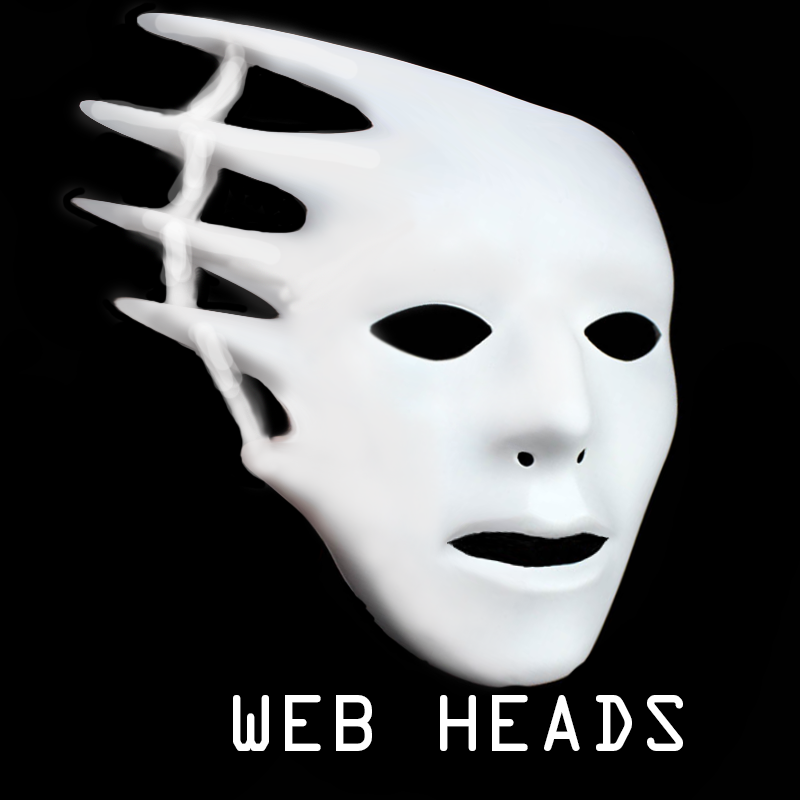
<style>
.page{position:relative;width:800px;height:800px;background:#000000}
.page>*{position:absolute;margin:0}
.t1{font:72px "OCRAStd";color:#ffffff}
</style>
<div class="page">
<p class="t1" style="left:233px;top:695px;width:450px;height:56px">WEB HEADS</p>
</div>
